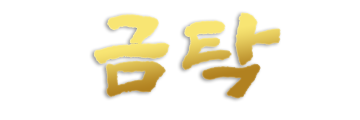
<style>
.page{position:relative;width:360px;height:120px;background:#ffffff}
.page>*{position:absolute;margin:0}
.t1{font:106.2px "SangSangRockOTF";letter-spacing:0.12em}
</style>
<div class="page">
<p class="t1" style="left:94px;top:13px;width:186px;height:85px">금탁</p>
</div>
